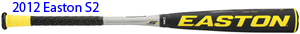
<style>
.page{position:relative;width:300px;height:34px;background:#ffffff}
.page>*{position:absolute;margin:0}
.t1{font:14px "MyriadPro-Regular";color:#0000ff}
</style>
<div class="page">
<p class="t1" style="left:12px;top:2px;width:87px;height:10px">2012 Easton S2</p>
</div>
